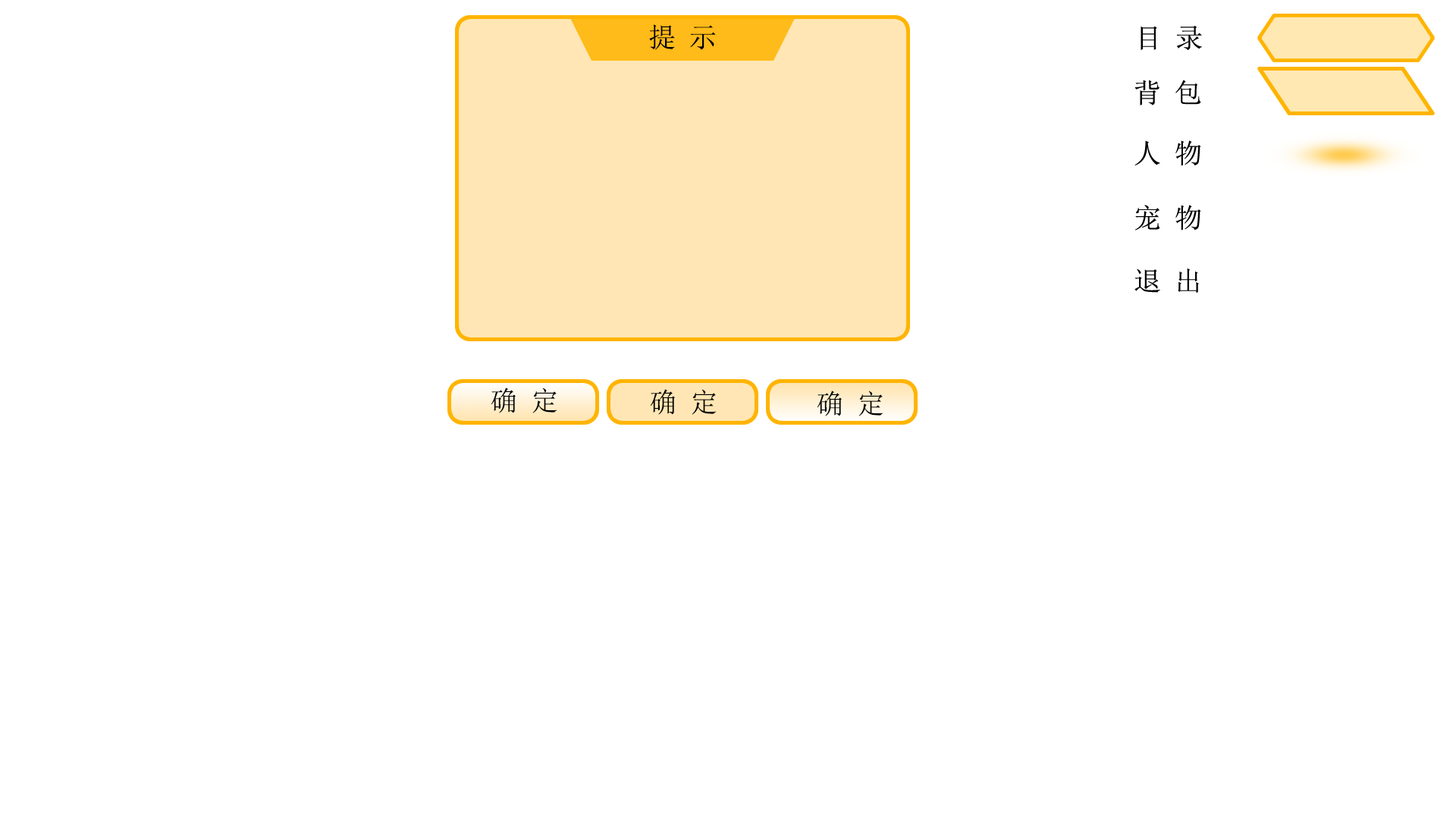
<style>
.page{position:relative;width:1456px;height:819px;background:#ffffff}
.page>*{position:absolute;margin:0}
.t1{font:27.3px "SimSun";color:#000000}
</style>
<div class="page">
<p class="t1" style="left:649px;top:24px;width:67px;height:26px">提 示</p>
<p class="t1" style="left:1141px;top:26px;width:61px;height:24px">目 录</p>
<p class="t1" style="left:1134px;top:80px;width:67px;height:25px">背 包</p>
<p class="t1" style="left:1134px;top:140px;width:67px;height:26px">人 物</p>
<p class="t1" style="left:1134px;top:205px;width:67px;height:26px">宠 物</p>
<p class="t1" style="left:1134px;top:268px;width:65px;height:25px">退 出</p>
<p class="t1" style="left:491px;top:388px;width:66px;height:25px">确 定</p>
<p class="t1" style="left:650px;top:389px;width:67px;height:26px">确 定</p>
<p class="t1" style="left:817px;top:391px;width:66px;height:25px">确 定</p>
</div>
